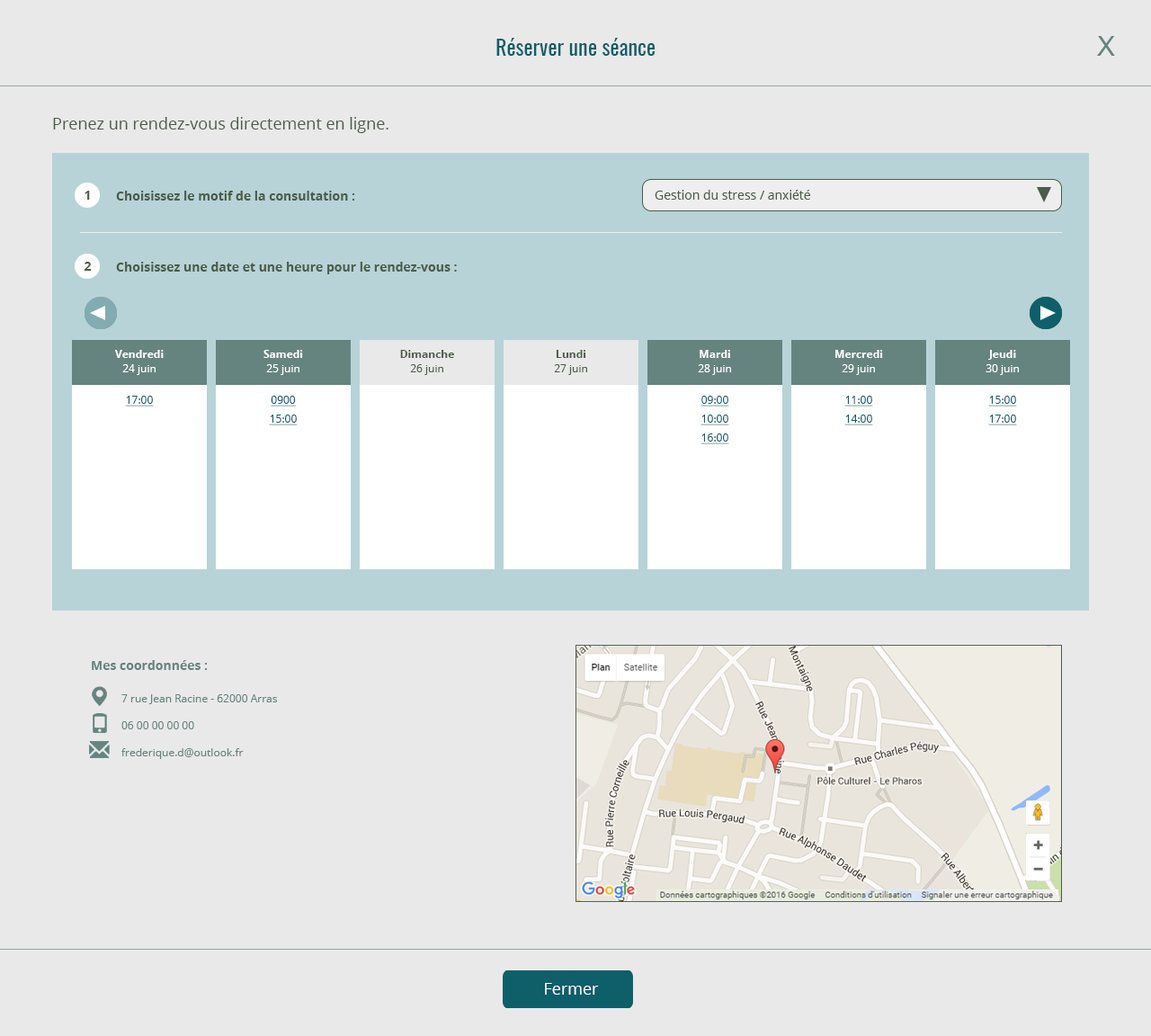
<style>
.page{position:relative;width:1151px;height:1036px;background:#eae9e9}
.page>*{position:absolute;margin:0}
.t1{font:21.6px "Oswald-Regular";color:#0e5f6a}
.t2{font:27px "ArialMT";color:#66847f}
.t3{font:16.2px "OpenSans";color:#4b5c4a}
.t4{font:12.2px "OpenSans-Bold";color:#4b5c4a}
.t5{font:12.6px "OpenSans-Bold";color:#4b5c4a}
.t6{font:12.6px "OpenSans";color:#4b5c4a}
.t7{font:10.8px "OpenSans-Bold";color:#ffffff}
.t8{font:10.8px "OpenSans-Bold";color:#4b5c4a}
.t9{font:10.8px "OpenSans";color:#ffffff}
.t10{font:10.8px "OpenSans";color:#4b5c4a}
.t11{font:10.8px "OpenSans";color:#0e5f6a;text-decoration:underline}
.t12{font:12.6px "OpenSans-Bold";color:#66847f}
.t13{font:10.8px "OpenSans";color:#66847f}
.t14{font:16.2px "OpenSans";color:#ffffff}
</style>
<div class="page">
<p class="t1" style="left:496px;top:38px;width:160px;height:18px">Réserver une séance</p>
<p class="t2" style="left:1097px;top:36px;width:18px;height:20px">X</p>
<p class="t3" style="left:53px;top:117px;width:335px;height:16px">Prenez un rendez-vous directement en ligne.</p>
<p class="t4" style="left:85px;top:191px;width:5px;height:9px">1</p>
<p class="t5" style="left:116px;top:191px;width:239px;height:10px">Choisissez le motif de la consultation :</p>
<p class="t6" style="left:655px;top:190px;width:155px;height:10px">Gestion du stress / anxiété</p>
<p class="t4" style="left:84px;top:262px;width:8px;height:9px">2</p>
<p class="t5" style="left:116px;top:262px;width:341px;height:12px">Choisissez une date et une heure pour le rendez-vous :</p>
<p class="t7" style="left:115px;top:350px;width:49px;height:8px">Vendredi</p>
<p class="t7" style="left:263px;top:350px;width:40px;height:8px">Samedi</p>
<p class="t8" style="left:400px;top:350px;width:54px;height:8px">Dimanche</p>
<p class="t8" style="left:556px;top:350px;width:30px;height:8px">Lundi</p>
<p class="t7" style="left:700px;top:350px;width:30px;height:8px">Mardi</p>
<p class="t7" style="left:835px;top:350px;width:48px;height:8px">Mercredi</p>
<p class="t7" style="left:988px;top:350px;width:28px;height:10px">Jeudi</p>
<p class="t9" style="left:122px;top:364px;width:34px;height:11px">24 juin</p>
<p class="t9" style="left:266px;top:364px;width:33px;height:11px">25 juin</p>
<p class="t10" style="left:410px;top:364px;width:33px;height:11px">26 juin</p>
<p class="t10" style="left:554px;top:364px;width:33px;height:11px">27 juin</p>
<p class="t9" style="left:698px;top:364px;width:33px;height:11px">28 juin</p>
<p class="t9" style="left:842px;top:364px;width:33px;height:11px">29 juin</p>
<p class="t9" style="left:986px;top:364px;width:33px;height:11px">30 juin</p>
<p class="t11" style="left:125px;top:396px;width:29px;height:10px">17:00</p>
<p class="t11" style="left:271px;top:396px;width:25px;height:10px">0900</p>
<p class="t11" style="left:701px;top:396px;width:28px;height:10px">09:00</p>
<p class="t11" style="left:844px;top:396px;width:29px;height:10px">11:00</p>
<p class="t11" style="left:988px;top:396px;width:29px;height:10px">15:00</p>
<p class="t11" style="left:269px;top:415px;width:29px;height:10px">15:00</p>
<p class="t11" style="left:701px;top:415px;width:28px;height:10px">10:00</p>
<p class="t11" style="left:844px;top:415px;width:29px;height:10px">14:00</p>
<p class="t11" style="left:988px;top:415px;width:29px;height:10px">17:00</p>
<p class="t11" style="left:701px;top:433px;width:28px;height:11px">16:00</p>
<p class="t12" style="left:92px;top:660px;width:116px;height:10px">Mes coordonnées :</p>
<p class="t13" style="left:121px;top:694px;width:156px;height:10px">7 rue Jean Racine - 62000 Arras</p>
<p class="t13" style="left:121px;top:721px;width:73px;height:8px">06 00 00 00 00</p>
<p class="t13" style="left:121px;top:748px;width:123px;height:11px">frederique.d@outlook.fr</p>
<p class="t14" style="left:545px;top:983px;width:54px;height:12px">Fermer</p>
</div>
